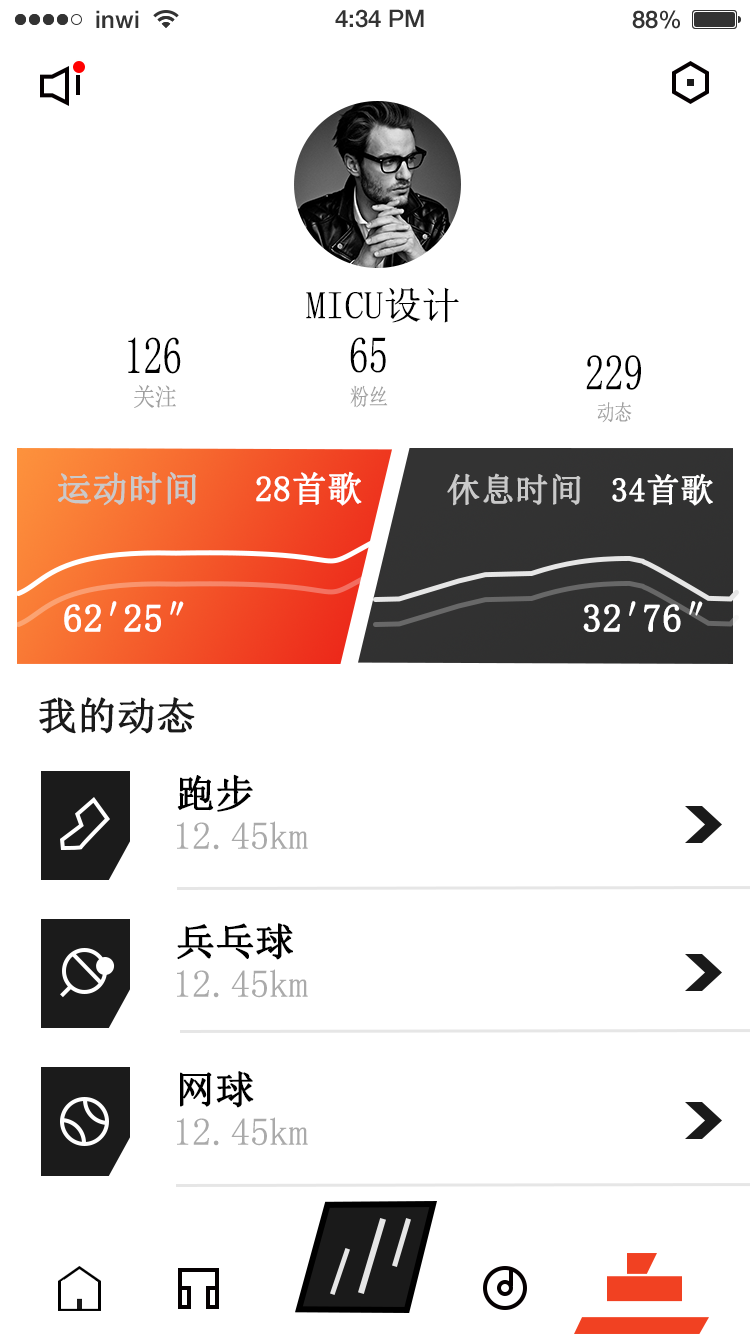
<style>
.page{position:relative;width:750px;height:1334px;background:#ffffff}
.page>*{position:absolute;margin:0}
.t1{font:38.6px "SimSun";color:#000000}
.t2{font:52px "SimSun";color:#000000;scale:0.74 1}
.t3{font:51px "SimSun";color:#000000;scale:0.76 1}
.t4{font:50px "SimSun";color:#000000;scale:0.77 1}
.t5{font:25px "SimSun";color:#a0a0a0;scale:0.88 1}
.t6{font:23px "SimSun";color:#a0a0a0;scale:0.83 1}
.t7{font:22px "SimSun";color:#a0a0a0;scale:0.8 1}
.t8{font:35px "SimSun";color:#c9c9c9;font-weight:bold}
.t9{font:35px "SimSun";color:#ffffff;font-weight:bold}
.t10{font:33px "SimSun";color:#c9c9c9;font-weight:bold}
.t11{font:33px "SimSun";color:#ffffff;font-weight:bold}
.t12{font:38.6px "SimSun";color:#ffffff;font-weight:bold}
.t13{font:38.6px "SimSun";color:#1a1a1a;font-weight:bold}
.t14{font:38.6px "SimSun";color:#000000;font-weight:bold}
.t15{font:38.6px "SimSun";color:#aaaaaa}
</style>
<div class="page">
<p class="t1" style="left:306px;top:287px;width:153px;height:36px">MICU设计</p>
<p class="t2" style="left:128px;top:337px;width:53px;height:37px">126</p>
<p class="t3" style="left:350px;top:337px;width:36px;height:36px">65</p>
<p class="t4" style="left:586px;top:355px;width:55px;height:35px">229</p>
<p class="t5" style="left:134px;top:385px;width:42px;height:23px">关注</p>
<p class="t6" style="left:350px;top:385px;width:38px;height:23px">粉丝</p>
<p class="t7" style="left:597px;top:401px;width:35px;height:22px">动态</p>
<p class="t8" style="left:58px;top:472px;width:138px;height:34px">运动时间</p>
<p class="t9" style="left:256px;top:471px;width:106px;height:35px">28首歌</p>
<p class="t10" style="left:447px;top:473px;width:134px;height:33px">休息时间</p>
<p class="t11" style="left:612px;top:473px;width:101px;height:33px">34首歌</p>
<p class="t12" style="left:64px;top:601px;width:53px;height:31px">62′</p>
<p class="t12" style="left:124px;top:601px;width:60px;height:31px">25″</p>
<p class="t12" style="left:583px;top:601px;width:53px;height:31px">32′</p>
<p class="t12" style="left:644px;top:601px;width:59px;height:31px">76″</p>
<p class="t13" style="left:39px;top:697px;width:156px;height:37px">我的动态</p>
<p class="t14" style="left:177px;top:774px;width:76px;height:38px">跑步</p>
<p class="t15" style="left:177px;top:821px;width:131px;height:29px">12.45km</p>
<p class="t14" style="left:177px;top:923px;width:116px;height:37px">兵乓球</p>
<p class="t15" style="left:177px;top:969px;width:131px;height:29px">12.45km</p>
<p class="t14" style="left:180px;top:1071px;width:74px;height:37px">网球</p>
<p class="t15" style="left:177px;top:1117px;width:131px;height:29px">12.45km</p>
</div>
